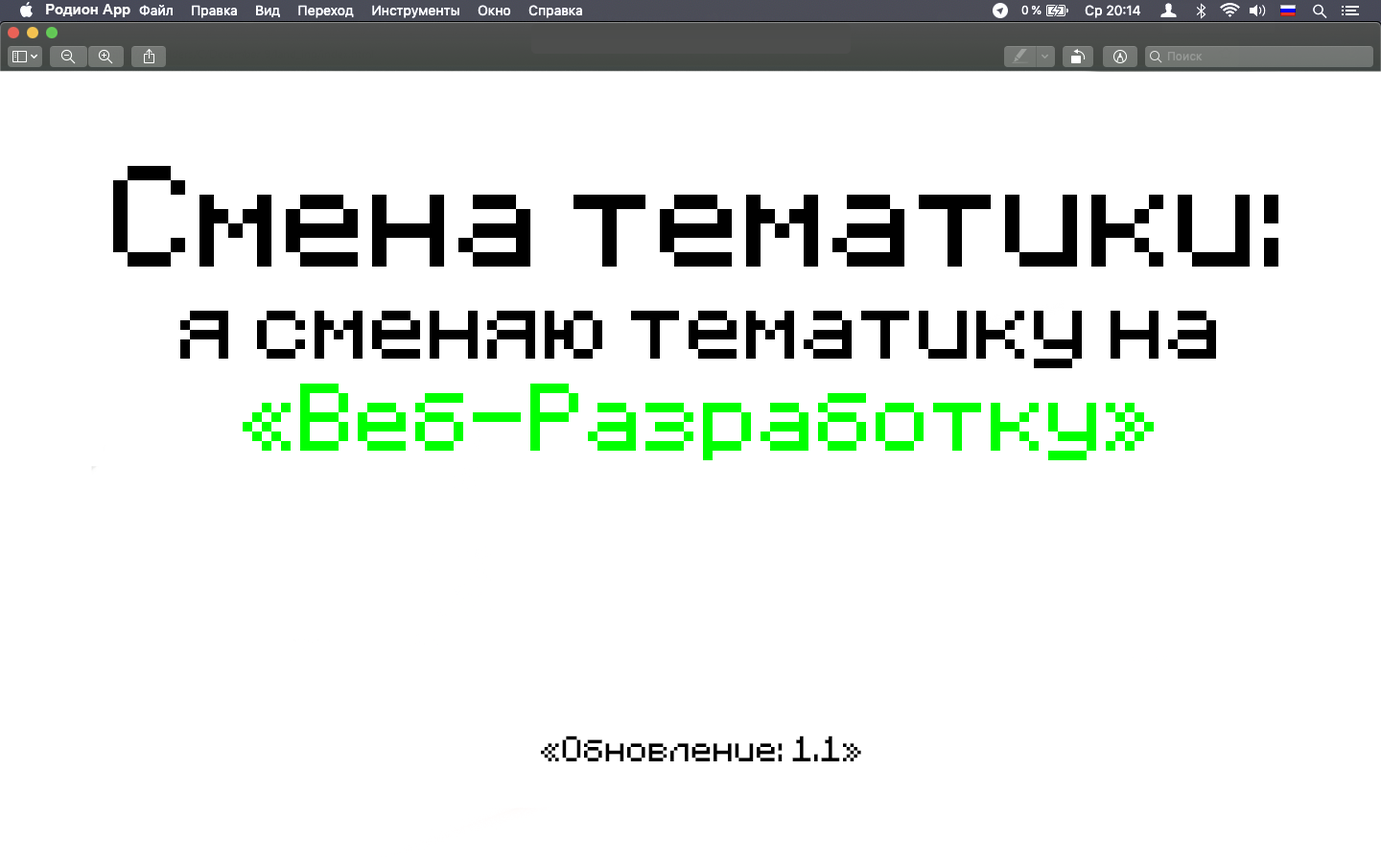
<style>
.page{position:relative;width:1381px;height:863px;background:#ffffff}
.page>*{position:absolute;margin:0}
.t1{font:14.4px "Arial-BoldMT";color:#ffffff}
.t2{font:76.7px "Minecraft";color:#000000}
.t3{font:115.1px "Minecraft";color:#000000}
.t4{font:76.7px "Minecraft";color:#00ff00}
.t5{font:28.8px "Minecraft";color:#000000}
</style>
<div class="page">
<p class="t1" style="left:46px;top:4px;width:84px;height:13px">Родион App</p>
<p class="t2" style="left:113px;top:166px;width:1166px;height:596px;text-align:center"><span class="t3">Смена тематики:<br></span>я сменяю тематику на <span class="t4">«Веб-Разработку»<br><br><br><br></span><span class="t5">«Обновление: 1.1»</span></p>
</div>
